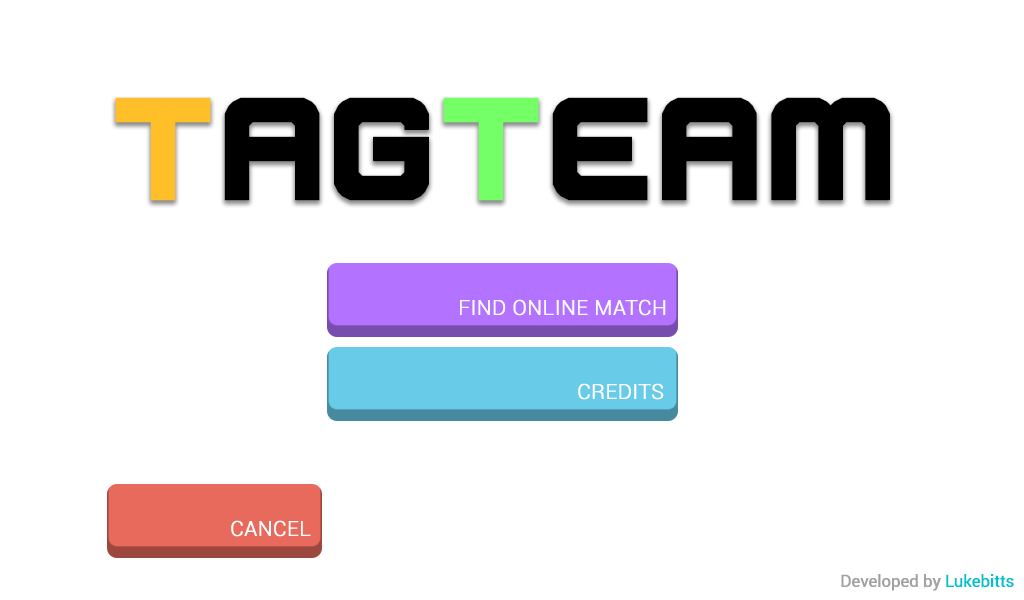
<style>
.page{position:relative;width:1024px;height:600px;background:#ffffff}
.page>*{position:absolute;margin:0}
.t1{font:125px "Scorpion";letter-spacing:0.035em;color:#000000;font-weight:bold}
.t2{font:125px "Scorpion";letter-spacing:0.035em;color:#ffbf29;font-weight:bold}
.t3{font:125px "Scorpion";letter-spacing:0.035em;color:#73ff65;font-weight:bold}
.t4{font:20.8px "Roboto-Light";letter-spacing:0.005em;color:#ffffff;font-weight:bold}
.t5{font:16.7px "Roboto-Regular";letter-spacing:-0.025em;color:#a1a1a1;font-weight:bold}
.t6{font:16.7px "Roboto-Regular";letter-spacing:-0.025em;color:#00c2ce;font-weight:bold}
</style>
<div class="page">
<p class="t1" style="left:115px;top:97px;width:775px;height:104px"><span class="t2">T</span>ag<span class="t3">T</span>eam</p>
<p class="t4" style="left:460px;top:299px;width:206px;height:17px">FIND ONLINE MATCH</p>
<p class="t4" style="left:578px;top:383px;width:86px;height:17px">CREDITS</p>
<p class="t4" style="left:231px;top:520px;width:80px;height:17px">CANCEL</p>
<p class="t5" style="left:841px;top:574px;width:173px;height:17px">Developed by <span class="t6">Lukebitts</span></p>
</div>
